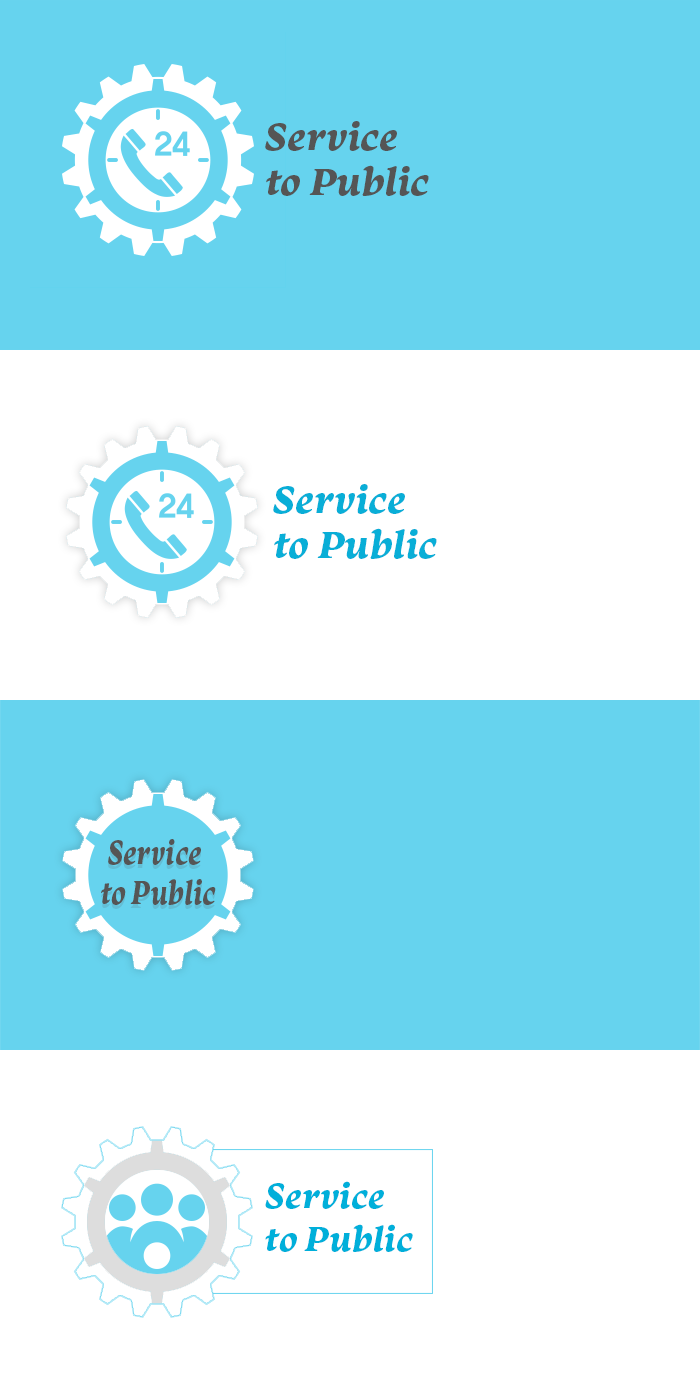
<style>
.page{position:relative;width:700px;height:1400px;background:#ffffff}
.page>*{position:absolute;margin:0}
.t1{font:40px/45px "Monarcha-BoldItalic";color:#555555}
.t2{font:40px/45px "Monarcha-BoldItalic";color:#0aaed7}
.t3{font:34.1px/40px "Monarcha-BoldItalic";color:#555555;scale:0.82 1}
.t4{font:34.1px/40px "Monarcha-BoldItalic";scale:0.82 1}
.t5{font:36px/42.7px "Monarcha-BoldItalic";color:#00afda}
</style>
<div class="page">
<p class="t1" style="left:265px;top:121px;width:164px;height:75px">Service <br>to Public</p>
<p class="t2" style="left:273px;top:484px;width:164px;height:75px">Service <br>to Public</p>
<p class="t3" style="left:101px;top:839px;width:115px;height:66px;text-align:center">Service <br>to Public</p>
<p class="t4" style="left:101px;top:843px;width:115px;height:66px;text-align:center">Service <br>to Public</p>
<p class="t5" style="left:265px;top:1181px;width:148px;height:71px">Service <br>to Public</p>
</div>
